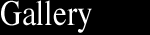
<style>
.page{position:relative;width:150px;height:35px;background:#000000}
.page>*{position:absolute;margin:0}
.t1{font:36px "Times-Roman";color:#ffffff;scale:0.86 1}
</style>
<div class="page">
<p class="t1" style="left:1px;top:0px;width:91px;height:33px">Gallery</p>
</div>
